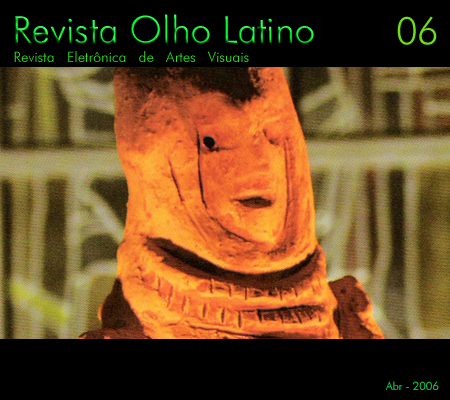
<style>
.page{position:relative;width:450px;height:400px;background:#000000}
.page>*{position:absolute;margin:0}
.t1{font:37.5px "FuturaBT-Light"}
.t2{font:37.5px "FuturaBT-Light";color:#6dde1a}
.t3{font:14.4px "FuturaBT-Light";color:#30df23}
.t4{font:11.4px "FuturaBT-Light";color:#11b748}
</style>
<div class="page">
<p class="t1" style="left:15px;top:14px;width:299px;height:30px">Revista Olho Latino</p>
<p class="t2" style="left:397px;top:16px;width:40px;height:29px">06</p>
<p class="t3" style="left:14px;top:51px;width:235px;height:11px">Revista   Eletrônica   de   Artes   Visuais</p>
<p class="t4" style="left:385px;top:381px;width:54px;height:9px">Abr - 2006</p>
</div>
